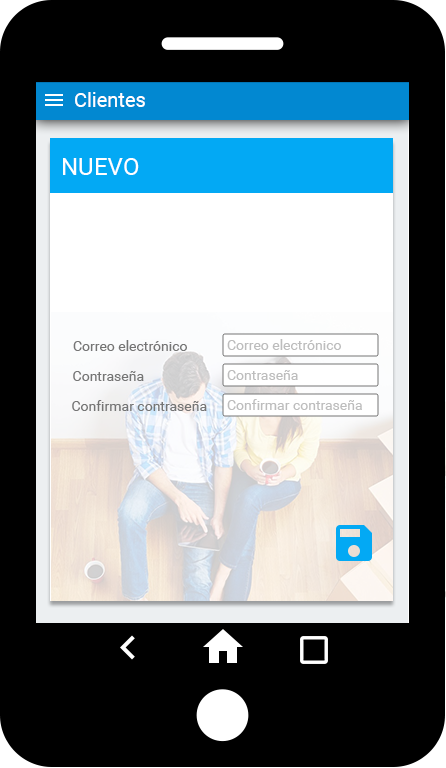
<style>
.page{position:relative;width:446px;height:768px;background:#000000}
.page>*{position:absolute;margin:0}
.t1{font:20px "Roboto-Regular";color:#ffffff}
.t2{font:24px "Roboto-Regular";color:#ffffff}
.t3{font:14px "Roboto-Regular";color:#757575}
.t4{font:14px "Roboto-Regular";color:#bdbdbd}
</style>
<div class="page">
<p class="t1" style="left:75px;top:92px;width:70px;height:15px">Clientes</p>
<p class="t2" style="left:63px;top:158px;width:76px;height:17px">NUEVO</p>
<p class="t3" style="left:73px;top:340px;width:114px;height:11px">Correo electrónico</p>
<p class="t4" style="left:227px;top:339px;width:114px;height:11px">Correo electrónico</p>
<p class="t3" style="left:73px;top:371px;width:71px;height:10px">Contraseña</p>
<p class="t4" style="left:227px;top:370px;width:71px;height:10px">Contraseña</p>
<p class="t3" style="left:72px;top:400px;width:135px;height:11px">Confirmar contraseña</p>
<p class="t4" style="left:227px;top:399px;width:135px;height:11px">Confirmar contraseña</p>
</div>
